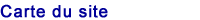
<style>
.page{position:relative;width:200px;height:20px;background:#ffffff}
.page>*{position:absolute;margin:0}
.t1{font:16.7px "ArialMT";letter-spacing:0.04em;color:#000099;font-weight:bold}
</style>
<div class="page">
<p class="t1" style="left:0px;top:4px;width:108px;height:14px">Carte du site</p>
</div>
